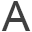
<style>
.page{position:relative;width:32px;height:32px;background:#ffffff}
.page>*{position:absolute;margin:0}
.t1{font:41.7px "ArialMT";color:#3f3f3f}
</style>
<div class="page">
<p class="t1" style="left:1px;top:1px;width:30px;height:30px">A</p>
</div>
